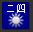
<style>
.page{position:relative;width:33px;height:32px;background:#000090}
.page>*{position:absolute;margin:0}
.t1{font:10.4px "SimSun";color:#ffffff}
</style>
<div class="page">
<p class="t1" style="left:7px;top:4px;width:18px;height:9px">二四</p>
</div>
